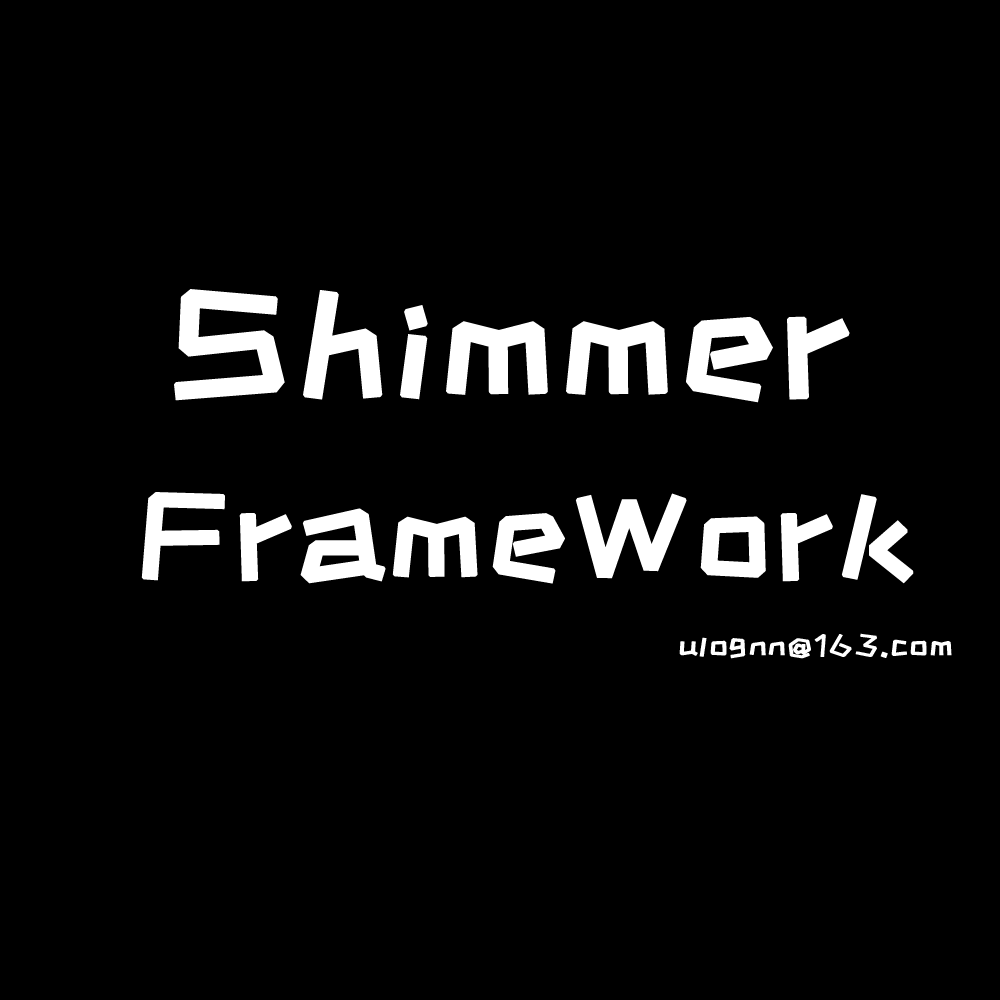
<style>
.page{position:relative;width:1000px;height:1000px;background:#000000}
.page>*{position:absolute;margin:0}
.t1{font:147.6px "HappyZcool-2016";letter-spacing:0.075em;color:#ffffff;font-weight:bold;scale:1.08 1}
.t2{font:122.4px "HappyZcool-2016";letter-spacing:0.075em;color:#ffffff;font-weight:bold;scale:1.08 1}
.t3{font:30px "HappyZcool-2016";letter-spacing:0.075em;color:#ffffff;font-weight:bold;scale:1.08 1}
</style>
<div class="page">
<p class="t1" style="left:174px;top:289px;width:676px;height:114px">Shimmer</p>
<p class="t2" style="left:141px;top:492px;width:773px;height:92px">FrameWork</p>
<p class="t3" style="left:679px;top:633px;width:273px;height:26px">ulognn@163.com</p>
</div>
